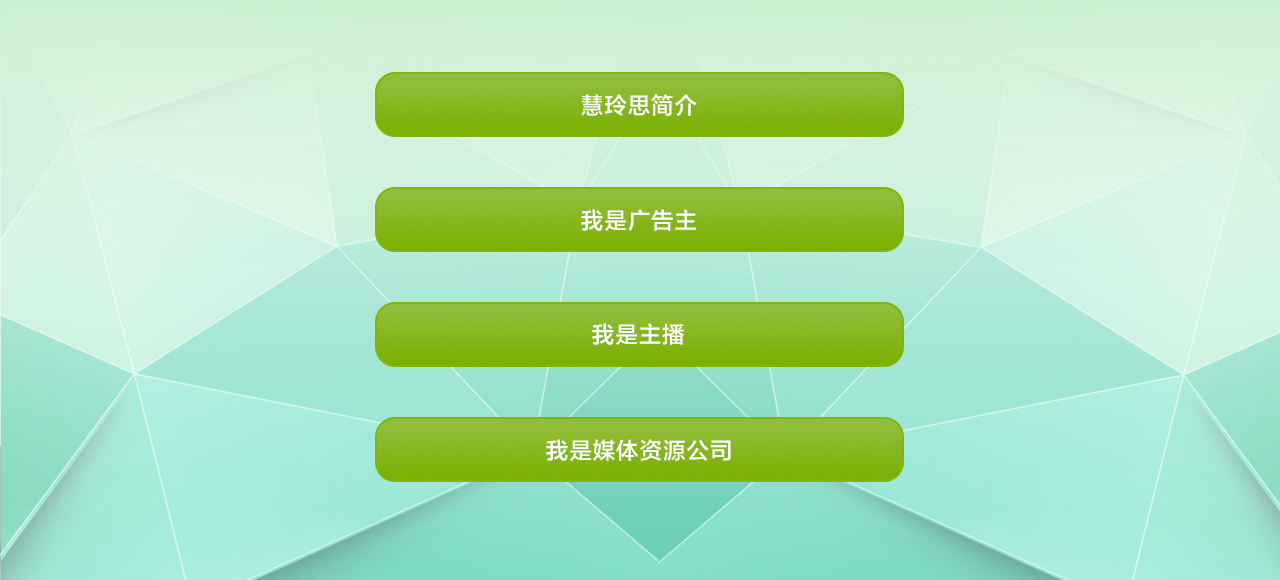
<style>
.page{position:relative;width:1280px;height:580px}
.page>*{position:absolute;margin:0}
.t1{font:22.7px "FZLTZHK--GBK1-0";letter-spacing:0.04em;color:#ffffff}
</style>
<div class="page">
<p class="t1" style="left:581px;top:94px;width:116px;height:22px">慧玲思简介</p>
<p class="t1" style="left:581px;top:209px;width:115px;height:22px">我是广告主</p>
<p class="t1" style="left:592px;top:323px;width:92px;height:22px">我是主播</p>
<p class="t1" style="left:546px;top:439px;width:185px;height:22px">我是媒体资源公司</p>
</div>
